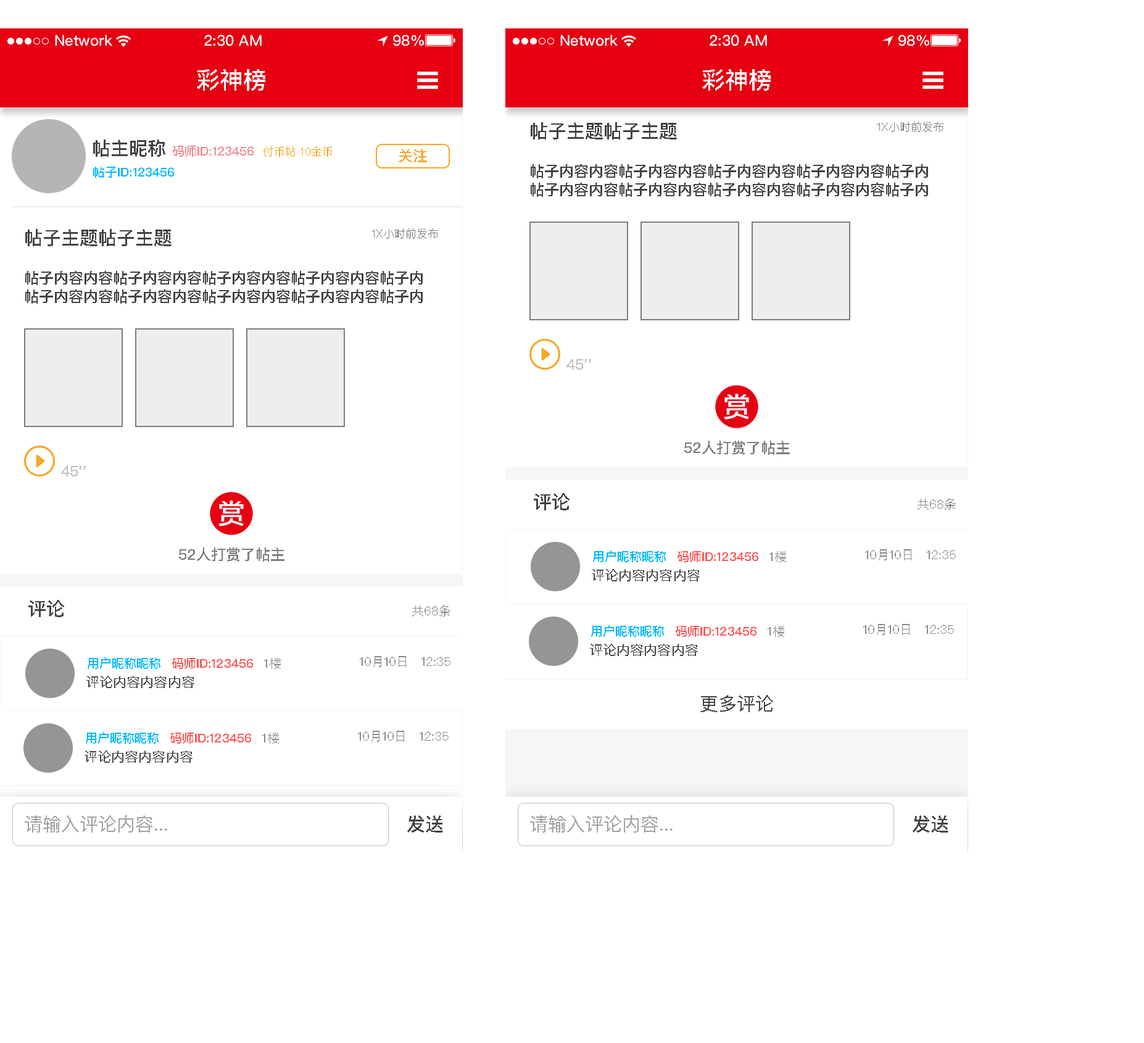
<style>
.page{position:relative;width:1144px;height:1043px;background:#ffffff}
.page>*{position:absolute;margin:0}
.t1{font:23.5px "PingFangSC-Medium";color:#ffffff;text-transform:uppercase}
.t2{font:18.5px "PingFangSC-Medium";color:#434343;text-transform:uppercase}
.t3{font:11.1px "PingFangSC-Regular";color:#7d7d7d;text-transform:uppercase}
.t4{font:12.3px "PingFangSC-Medium";color:#f08d91;text-transform:uppercase}
.t5{font:11.1px "PingFangSC-Regular";color:#f6a623;text-transform:uppercase}
.t6{font:14.8px "PingFangSC-Medium";color:#f6a623;text-transform:uppercase}
.t7{font:12.3px "PingFangSC-Medium";color:#01b9fd;text-transform:uppercase}
.t8{font:14.8px/18.5px "PingFangSC-Medium";color:#434343;text-transform:uppercase}
.t9{font:14.8px "PingFangSC-Medium";color:#bfbfbf;text-transform:uppercase}
.t10{font:14.8px "PingFangSC-Medium";color:#7d7d7d;text-transform:uppercase}
.t11{font:12.3px "PingFangSC-Regular";color:#898989;text-transform:uppercase}
.t12{font:12.3px "PingFangSC-Medium";color:#ff5858;text-transform:uppercase}
.t13{font:13.6px "PingFangSC-Regular";color:#434343;text-transform:uppercase}
.t14{font:18.5px "PingFangSC-Regular";color:#434343;text-transform:uppercase}
.t15{font:18.5px "PingFangSC-Regular";color:#a0a0a0;text-transform:uppercase}
</style>
<div class="page">
<p class="t1" style="left:197px;top:69px;width:68px;height:22px">彩神榜</p>
<p class="t1" style="left:702px;top:69px;width:69px;height:22px">彩神榜</p>
<p class="t2" style="left:531px;top:122px;width:146px;height:17px">帖子主题帖子主题</p>
<p class="t3" style="left:877px;top:122px;width:66px;height:10px">1x小时前发布</p>
<p class="t2" style="left:93px;top:139px;width:72px;height:18px">帖主昵称</p>
<p class="t4" style="left:173px;top:146px;width:81px;height:11px">码师id:123456</p>
<p class="t5" style="left:263px;top:146px;width:69px;height:11px">付币帖 10金币</p>
<p class="t6" style="left:399px;top:149px;width:28px;height:13px">关注</p>
<p class="t7" style="left:93px;top:167px;width:81px;height:11px">帖子id:123456</p>
<p class="t8" style="left:531px;top:164px;width:397px;height:33px;text-align:center">帖子内容内容帖子内容内容帖子内容内容帖子内容内容帖子内<br>帖子内容内容帖子内容内容帖子内容内容帖子内容内容帖子内</p>
<p class="t2" style="left:25px;top:229px;width:146px;height:17px">帖子主题帖子主题</p>
<p class="t3" style="left:372px;top:228px;width:66px;height:11px">1x小时前发布</p>
<p class="t8" style="left:25px;top:271px;width:398px;height:33px;text-align:center">帖子内容内容帖子内容内容帖子内容内容帖子内容内容帖子内<br>帖子内容内容帖子内容内容帖子内容内容帖子内容内容帖子内</p>
<p class="t9" style="left:566px;top:359px;width:25px;height:11px">45''</p>
<p class="t10" style="left:684px;top:440px;width:106px;height:15px">52人打赏了帖主</p>
<p class="t9" style="left:61px;top:466px;width:25px;height:10px">45''</p>
<p class="t2" style="left:534px;top:493px;width:35px;height:17px">评论</p>
<p class="t11" style="left:917px;top:498px;width:39px;height:12px">共68条</p>
<p class="t10" style="left:179px;top:547px;width:105px;height:14px">52人打赏了帖主</p>
<p class="t7" style="left:593px;top:550px;width:73px;height:12px">用户昵称昵称</p>
<p class="t12" style="left:677px;top:551px;width:81px;height:11px">码师ID:123456</p>
<p class="t11" style="left:769px;top:551px;width:17px;height:11px">1楼</p>
<p class="t11" style="left:865px;top:549px;width:91px;height:11px">10月10日   12:35</p>
<p class="t13" style="left:592px;top:569px;width:108px;height:12px">评论内容内容内容</p>
<p class="t2" style="left:28px;top:600px;width:36px;height:17px">评论</p>
<p class="t11" style="left:412px;top:605px;width:38px;height:11px">共68条</p>
<p class="t7" style="left:591px;top:625px;width:73px;height:12px">用户昵称昵称</p>
<p class="t12" style="left:676px;top:626px;width:80px;height:11px">码师ID:123456</p>
<p class="t11" style="left:767px;top:626px;width:17px;height:11px">1楼</p>
<p class="t11" style="left:863px;top:624px;width:91px;height:11px">10月10日   12:35</p>
<p class="t13" style="left:590px;top:643px;width:108px;height:13px">评论内容内容内容</p>
<p class="t7" style="left:88px;top:657px;width:72px;height:12px">用户昵称昵称</p>
<p class="t12" style="left:172px;top:658px;width:81px;height:11px">码师ID:123456</p>
<p class="t11" style="left:264px;top:658px;width:17px;height:11px">1楼</p>
<p class="t11" style="left:360px;top:656px;width:90px;height:11px">10月10日   12:35</p>
<p class="t13" style="left:86px;top:676px;width:108px;height:12px">评论内容内容内容</p>
<p class="t14" style="left:700px;top:695px;width:73px;height:17px">更多评论</p>
<p class="t7" style="left:86px;top:732px;width:73px;height:11px">用户昵称昵称</p>
<p class="t12" style="left:170px;top:732px;width:81px;height:11px">码师ID:123456</p>
<p class="t11" style="left:262px;top:732px;width:17px;height:11px">1楼</p>
<p class="t11" style="left:358px;top:730px;width:90px;height:12px">10月10日   12:35</p>
<p class="t13" style="left:85px;top:750px;width:107px;height:12px">评论内容内容内容</p>
<p class="t15" style="left:25px;top:815px;width:142px;height:17px">请输入评论内容...</p>
<p class="t2" style="left:407px;top:815px;width:36px;height:17px">发送</p>
<p class="t15" style="left:530px;top:815px;width:142px;height:17px">请输入评论内容...</p>
<p class="t2" style="left:912px;top:815px;width:36px;height:17px">发送</p>
</div>
